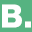
<style>
.page{position:relative;width:32px;height:32px;background:#56b381}
.page>*{position:absolute;margin:0}
.t1{font:32.1px "HelveticaNeue-Heavy";color:#ffffff}
</style>
<div class="page">
<p class="t1" style="left:2px;top:4px;width:29px;height:24px">B.</p>
</div>
